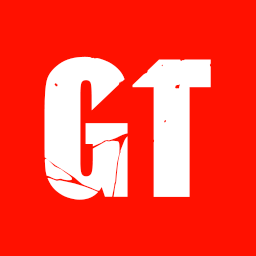
<style>
.page{position:relative;width:256px;height:256px;background:#ff1100}
.page>*{position:absolute;margin:0}
.t1{font:173.6px "GGfont_STRIVE";color:#ffffff}
</style>
<div class="page">
<p class="t1" style="left:44px;top:56px;width:167px;height:144px">GT</p>
</div>
